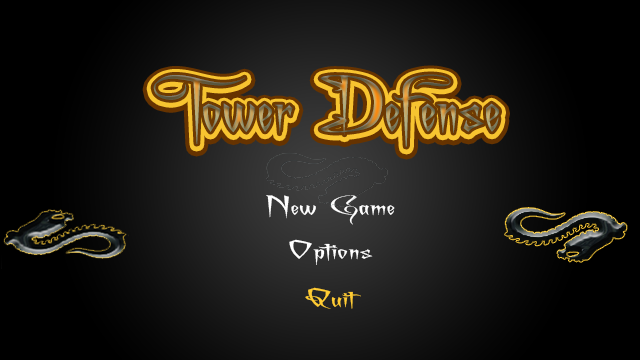
<style>
.page{position:relative;width:640px;height:360px;background:#000000}
.page>*{position:absolute;margin:0}
.t1{font:87px "ACharmingFontExpanded"}
.t2{font:30px "ACharmingFontSuperexpanded";color:#ffffff}
.t3{font:30px "ACharmingFontSuperexpanded";color:#ffcc33}
</style>
<div class="page">
<p class="t1" style="left:153px;top:76px;width:346px;height:73px">Tower Defense</p>
<p class="t1" style="left:153px;top:75px;width:346px;height:73px">Tower Defense</p>
<p class="t1" style="left:153px;top:74px;width:346px;height:73px">Tower Defense</p>
<p class="t2" style="left:266px;top:195px;width:129px;height:30px">New Game</p>
<p class="t2" style="left:289px;top:239px;width:84px;height:26px">Options</p>
<p class="t3" style="left:305px;top:287px;width:56px;height:22px">Quit</p>
</div>
